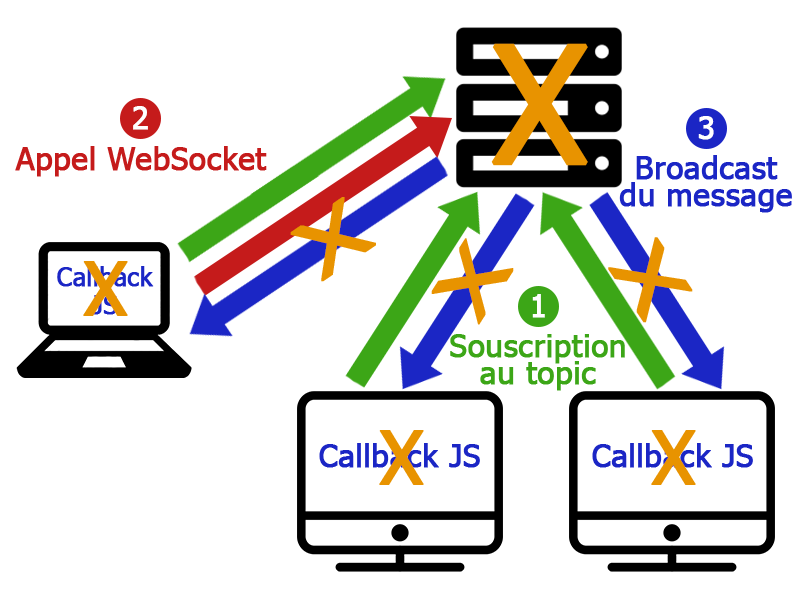
<style>
.page{position:relative;width:800px;height:600px;background:#ffffff}
.page>*{position:absolute;margin:0}
.t1{font:161.5px "Tahoma";color:#e89300;font-weight:bold}
.t2{font:31.2px "Tahoma";color:#ffffff;font-weight:bold}
.t3{font:31.2px "Tahoma";color:#c51b1b;font-weight:bold}
.t4{font:31.2px "Tahoma";color:#1b26c5;font-weight:bold}
.t5{font:76.7px "Tahoma";color:#e89300;font-weight:bold;scale:1.45 1}
.t6{font:25px "Tahoma";color:#1b26c5;font-weight:bold}
.t7{font:73.9px "Tahoma";color:#e89300;font-weight:bold}
.t8{font:31.2px "Tahoma";color:#3ca617;font-weight:bold}
</style>
<div class="page">
<p class="t1" style="left:491px;top:43px;width:97px;height:123px">X</p>
<p class="t2" style="left:133px;top:106px;width:15px;height:24px">2</p>
<p class="t2" style="left:698px;top:116px;width:16px;height:24px">3</p>
<p class="t3" style="left:15px;top:146px;width:252px;height:31px">Appel WebSocket</p>
<p class="t4" style="left:619px;top:155px;width:173px;height:58px;text-align:center">Broadcast<br>du message</p>
<p class="t5" style="left:290px;top:197px;width:86px;height:85px;rotate:-34deg">X</p>
<p class="t5" style="left:431px;top:238px;width:83px;height:87px;rotate:-58deg">X</p>
<p class="t5" style="left:608px;top:237px;width:85px;height:86px;rotate:56deg">X</p>
<p class="t6" style="left:57px;top:266px;width:97px;height:49px;text-align:center">Callback<br>JS</p>
<p class="t7" style="left:83px;top:261px;width:45px;height:55px">X</p>
<p class="t2" style="left:532px;top:294px;width:13px;height:24px">1</p>
<p class="t8" style="left:450px;top:334px;width:175px;height:57px;text-align:center">Souscription<br>au topic</p>
<p class="t7" style="left:379px;top:430px;width:45px;height:55px">X</p>
<p class="t7" style="left:651px;top:430px;width:45px;height:55px">X</p>
<p class="t4" style="left:319px;top:443px;width:161px;height:25px">Callback JS</p>
<p class="t4" style="left:592px;top:443px;width:161px;height:25px">Callback JS</p>
</div>
